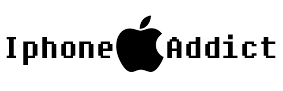
<style>
.page{position:relative;width:283px;height:91px;background:#ffffff}
.page>*{position:absolute;margin:0}
.t1{font:30px "Fixedsys";color:#000000}
</style>
<div class="page">
<p class="t1" style="left:6px;top:34px;width:270px;height:31px">Iphone  Addict</p>
</div>
